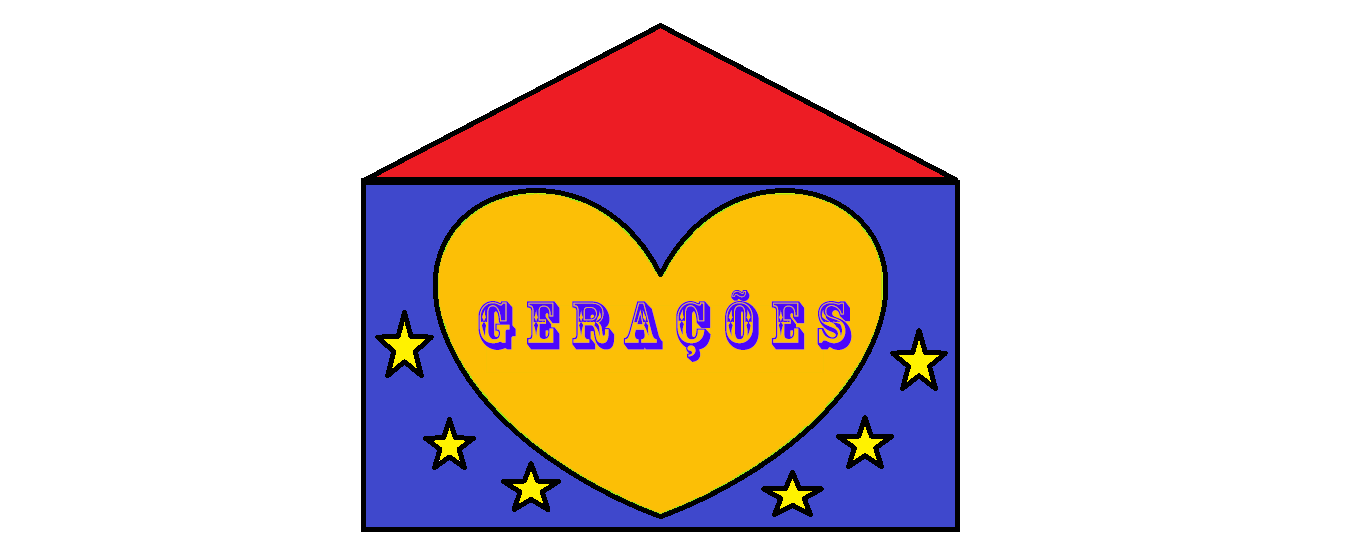
<style>
.page{position:relative;width:1350px;height:551px;background:#ffffff}
.page>*{position:absolute;margin:0}
.t1{font:64px "RosewoodStd-Regular";color:#4b06fc}
.t2{font:64px "RosewoodStd-Regular";color:#6efc06}
</style>
<div class="page">
<p class="t1" style="left:478px;top:290px;width:374px;height:72px"><span class="t2">                              </span>G E R A Ç Õ E S</p>
</div>
